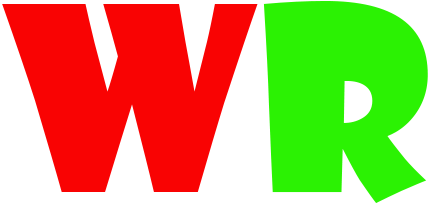
<style>
.page{position:relative;width:429px;height:204px;background:#f90303}
.page>*{position:absolute;margin:0}
.t1{font:250px "ShowcardGothic-Reg";color:#f90303}
.t2{font:250px "ShowcardGothic-Reg";color:#2bf203}
</style>
<div class="page">
<p class="t1" style="left:2px;top:1px;width:426px;height:202px">W<span class="t2">R</span></p>
</div>
